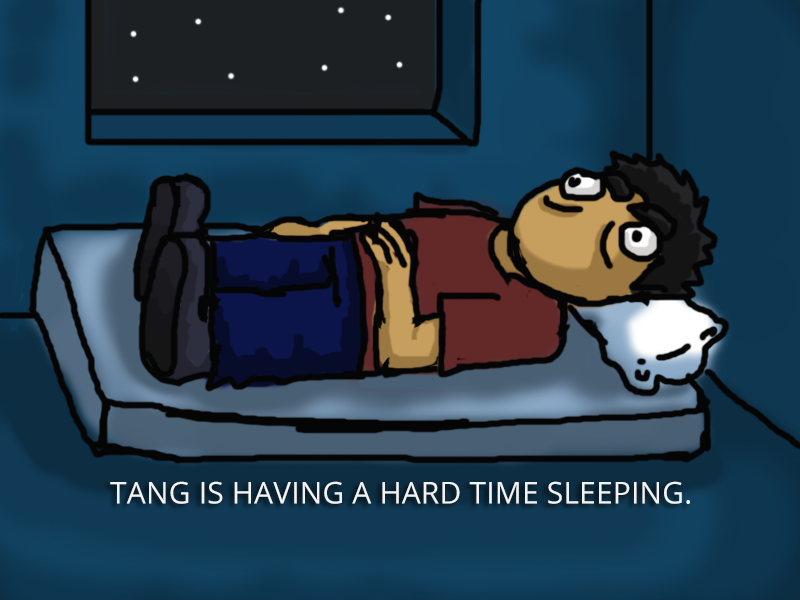
<style>
.page{position:relative;width:800px;height:600px}
.page>*{position:absolute;margin:0}
.t1{font:30px "OpenSans";letter-spacing:0.005em;color:#f3f3f3}
</style>
<div class="page">
<p class="t1" style="left:110px;top:481px;width:580px;height:23px">TANG IS HAVING A HARD TIME SLEEPING.</p>
</div>
